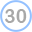
<style>
.page{position:relative;width:32px;height:32px;background:#ffffff}
.page>*{position:absolute;margin:0}
.t1{font:19.3px "ArialRoundedMTBold";color:#a8a8a8}
</style>
<div class="page">
<p class="t1" style="left:5px;top:9px;width:22px;height:14px">30</p>
</div>
